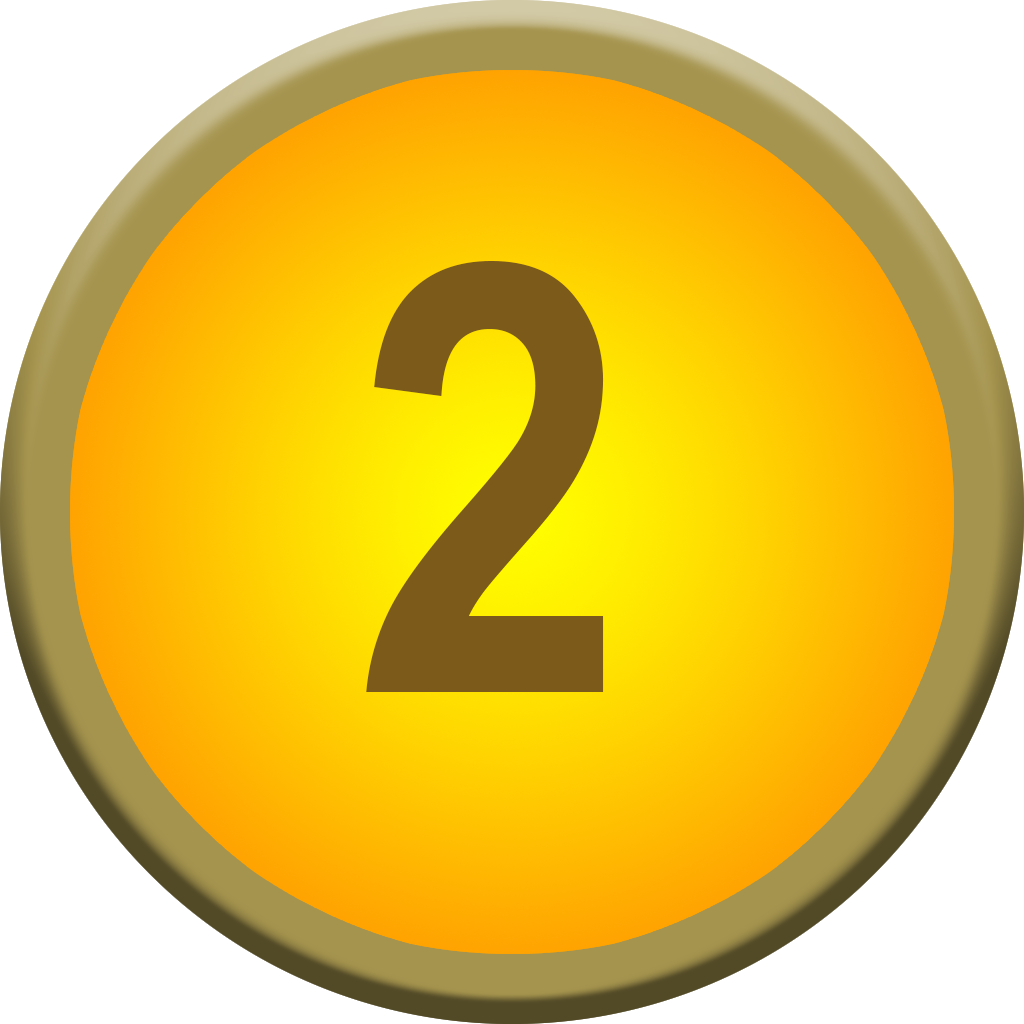
<style>
.page{position:relative;width:1024px;height:1024px;background:#ffffff}
.page>*{position:absolute;margin:0}
.t1{font:600px "ArialNarrow-Bold";color:#7c5a19}
</style>
<div class="page">
<p class="t1" style="left:366px;top:261px;width:238px;height:431px">2</p>
</div>
